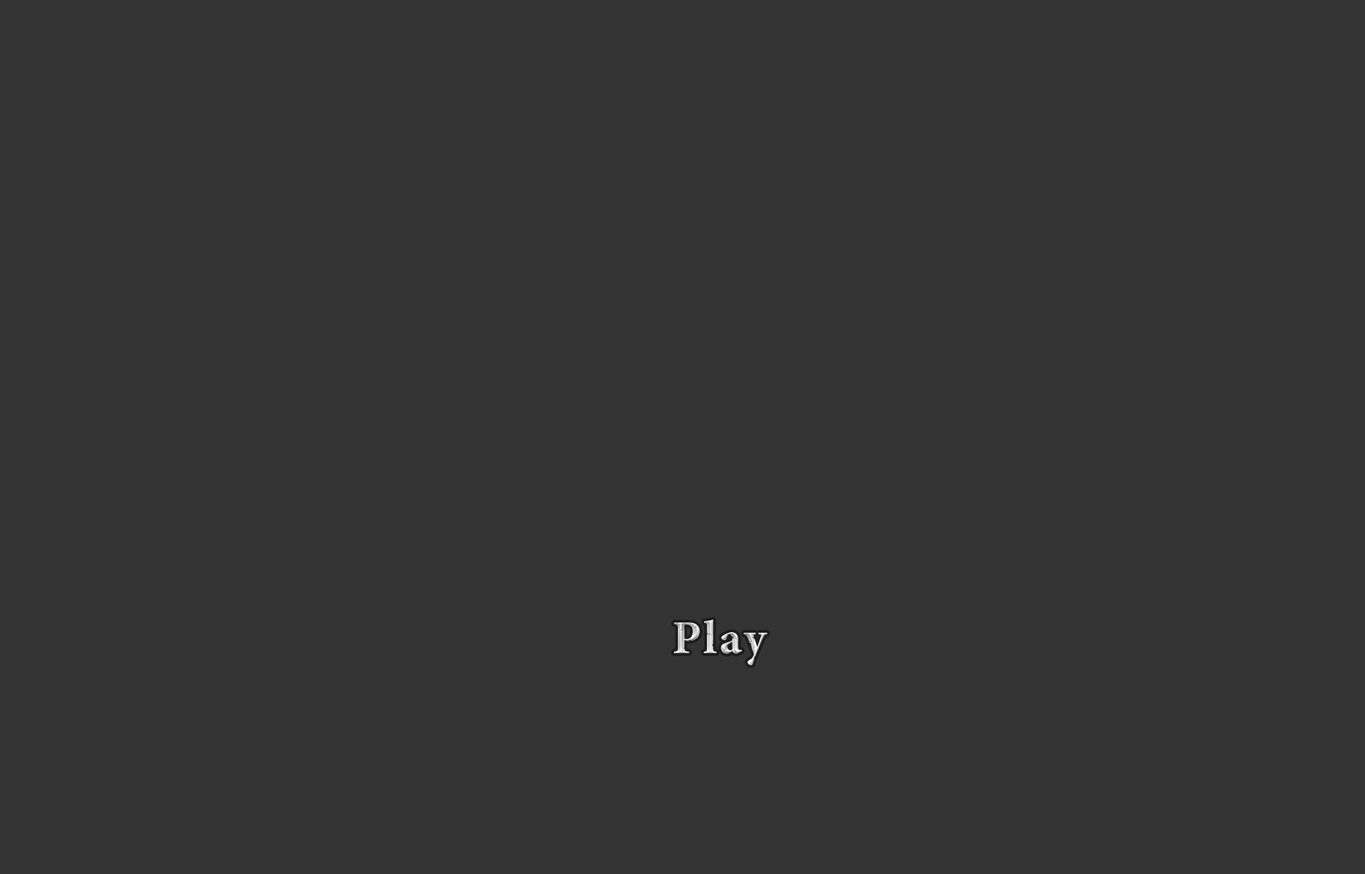
<style>
.page{position:relative;width:1365px;height:874px;background:#333333}
.page>*{position:absolute;margin:0}
.t1{font:47.4px "MinionPro-Bold";letter-spacing:0.05em}
</style>
<div class="page">
<p class="t1" style="left:674px;top:619px;width:93px;height:46px">Play</p>
</div>
